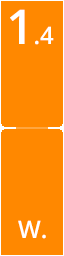
<style>
.page{position:relative;width:64px;height:256px;background:#ff8800}
.page>*{position:absolute;margin:0}
.t1{font:24px "OpenSans-Semibold";color:#ffffff}
.t2{font:48px "OpenSans-Semibold";color:#ffffff}
</style>
<div class="page">
<p class="t1" style="left:10px;top:9px;width:44px;height:36px"><span class="t2">1</span>.4</p>
<p class="t1" style="left:18px;top:220px;width:28px;height:19px">W.</p>
</div>
